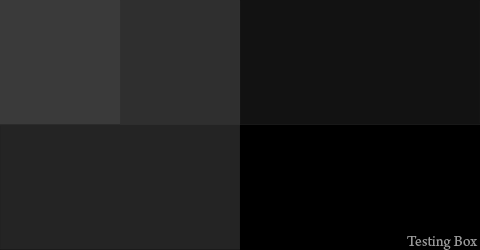
<style>
.page{position:relative;width:480px;height:250px;background:#242424}
.page>*{position:absolute;margin:0}
.t1{font:16px "ArnoPro-Regular";color:#999999}
</style>
<div class="page">
<p class="t1" style="left:407px;top:236px;width:71px;height:14px">Testing Box</p>
</div>
